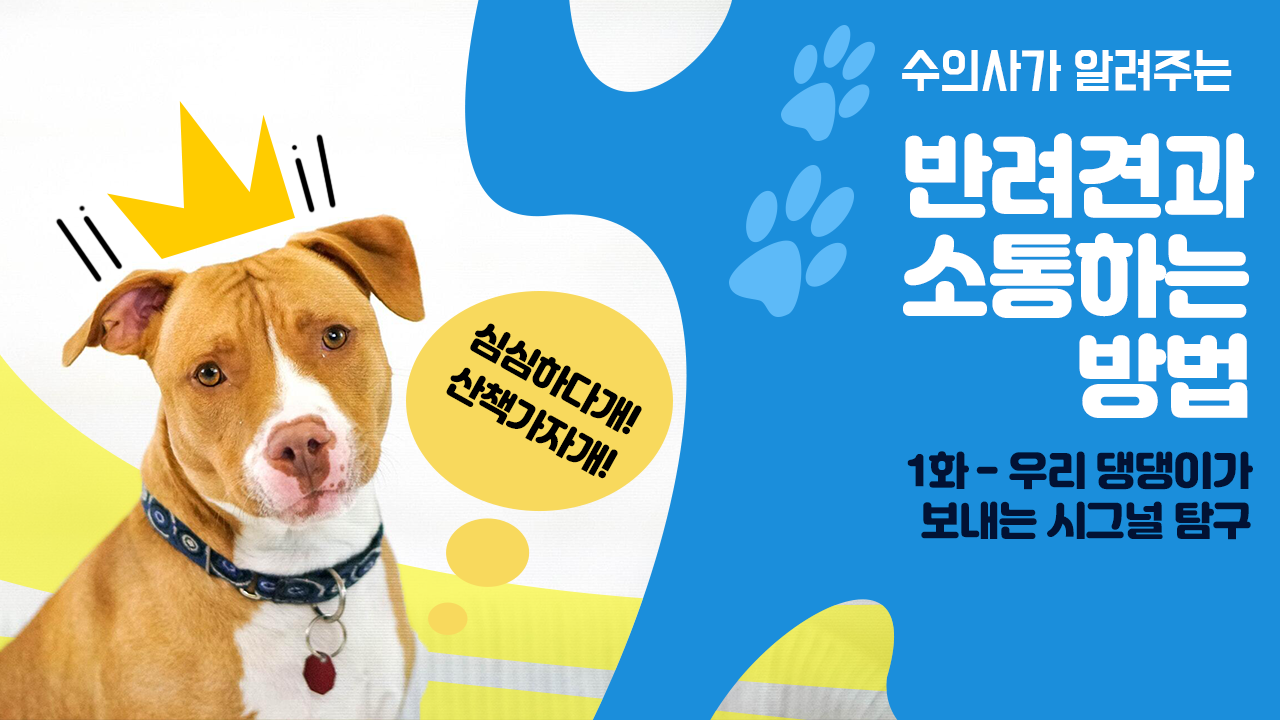
<style>
.page{position:relative;width:1280px;height:720px;background:#1b8edb}
.page>*{position:absolute;margin:0}
.t1{font:43px "BMDoHyeon";letter-spacing:-0.03em;color:#ffffff}
.t2{font:90px/100px "Jalnan";letter-spacing:-0.03em;color:#ffffff}
.t3{font:36px/50px "Jalnan";letter-spacing:-0.03em;color:#000000}
.t4{font:40px/50px "Jalnan";letter-spacing:-0.03em;color:#021234}
</style>
<div class="page">
<p class="t1" style="left:902px;top:50px;width:330px;height:41px">수의사가 알려주는</p>
<p class="t2" style="left:903px;top:133px;width:352px;height:285px;text-align:right">반려견과<br>소통하는<br>방법</p>
<p class="t3" style="left:446px;top:323px;width:196px;height:156px;text-align:right;rotate:29deg">심심하다개!<br>산책가자개!</p>
<p class="t4" style="left:907px;top:451px;width:346px;height:89px;text-align:right">1화 - 우리 댕댕이가<br>보내는 시그널 탐구</p>
</div>
